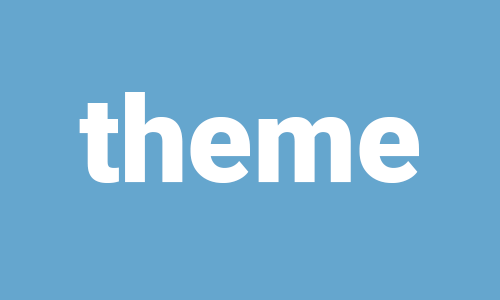
<style>
.page{position:relative;width:500px;height:300px;background:#65a6ce}
.page>*{position:absolute;margin:0}
.t1{font:120px "Roboto-Black";color:#ffffff}
</style>
<div class="page">
<p class="t1" style="left:79px;top:92px;width:340px;height:91px">theme</p>
<p class="t1" style="left:141px;top:92px;width:216px;height:91px">web</p>
<p class="t1" style="left:186px;top:92px;width:123px;height:91px">xd</p>
</div>
